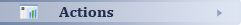
<style>
.page{position:relative;width:241px;height:25px}
.page>*{position:absolute;margin:0}
.t1{font:16px "Cambria-Bold";color:#202f4e}
</style>
<div class="page">
<p class="t1" style="left:59px;top:7px;width:55px;height:10px">Actions</p>
</div>
